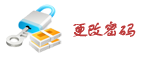
<style>
.page{position:relative;width:142px;height:58px;background:#ffffff}
.page>*{position:absolute;margin:0}
.t1{font:18px "FZSTK--GBK1-0";letter-spacing:-0.14em;color:#bd3a3a;font-weight:bold}
</style>
<div class="page">
<p class="t1" style="left:73px;top:21px;width:63px;height:16px">更改密码</p>
</div>
